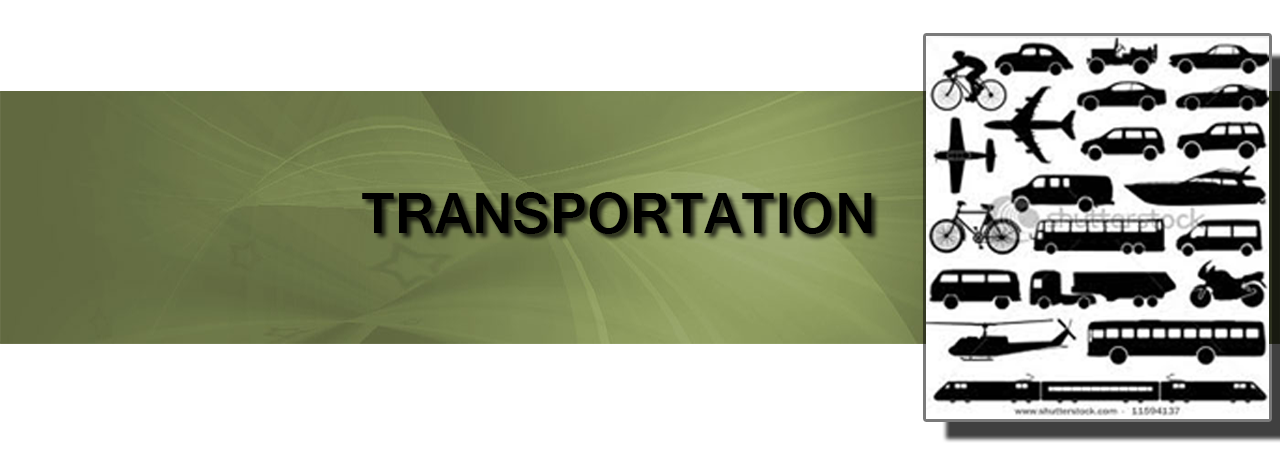
<style>
.page{position:relative;width:1280px;height:449px;background:#ffffff}
.page>*{position:absolute;margin:0}
.t1{font:60px "Gautami-Bold";color:#000000}
</style>
<div class="page">
<p class="t1" style="left:362px;top:192px;width:510px;height:42px">TRANSPORTATION</p>
</div>
